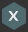
<style>
.page{position:relative;width:28px;height:32px;background:#4f6b70}
.page>*{position:absolute;margin:0}
.t1{font:18px "LucidaSansUnicode";color:#eeeeee}
</style>
<div class="page">
<p class="t1" style="left:8px;top:11px;width:11px;height:10px">x</p>
</div>
